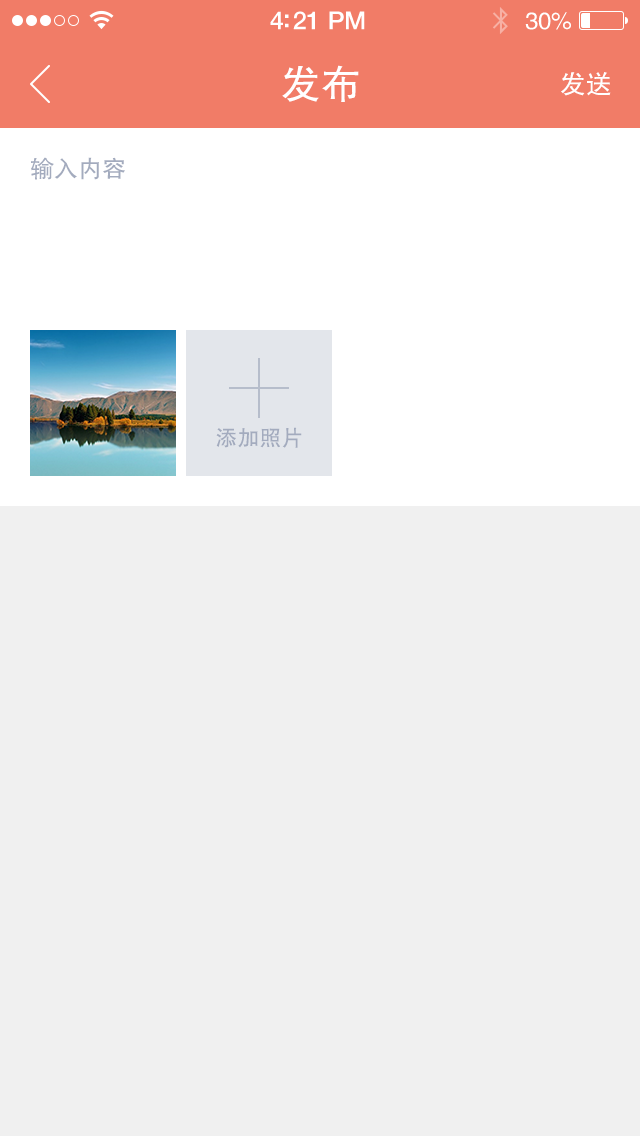
<style>
.page{position:relative;width:640px;height:1136px;background:#f0f0f0}
.page>*{position:absolute;margin:0}
.t1{font:25px "HelveticaNeue-Medium";letter-spacing:-0.02em;color:#ffffff}
.t2{font:24px "FZHTJW--GB1-0";letter-spacing:-0.02em;color:#ffffff}
.t3{font:40px "FZHTJW--GB1-0";color:#ffffff}
.t4{font:26px "FZHTJW--GB1-0";color:#ffffff}
.t5{font:24px "FZHTJW--GB1-0";color:#a3abbe}
.t6{font:22px "FZHTJW--GB1-0";color:#a3abbe}
</style>
<div class="page">
<p class="t1" style="left:270px;top:11px;width:95px;height:19px">4:21 PM</p>
<p class="t2" style="left:525px;top:12px;width:46px;height:18px">30%</p>
<p class="t3" style="left:282px;top:65px;width:77px;height:37px">发布</p>
<p class="t4" style="left:561px;top:72px;width:50px;height:24px">发送</p>
<p class="t5" style="left:31px;top:157px;width:94px;height:23px">输入内容</p>
<p class="t6" style="left:216px;top:427px;width:86px;height:21px">添加照片</p>
</div>
